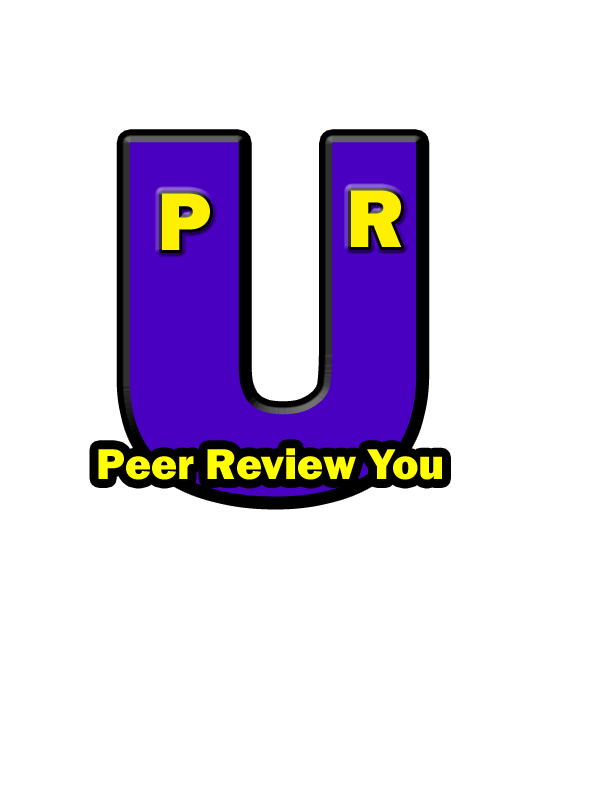
<style>
.page{position:relative;width:612px;height:792px;background:#ffffff}
.page>*{position:absolute;margin:0}
.t1{font:523px "FranklinGothic-Heavy";color:#4900c1}
.t2{font:84.7px "FranklinGothic-Heavy";color:#fff000}
.t3{font:44.8px "FranklinGothic-Heavy";color:#ffff00}
</style>
<div class="page">
<p class="t1" style="left:129px;top:142px;width:288px;height:355px">U</p>
<p class="t2" style="left:162px;top:193px;width:48px;height:57px">P</p>
<p class="t2" style="left:351px;top:190px;width:51px;height:57px">R</p>
<p class="t3" style="left:98px;top:448px;width:344px;height:32px">Peer Review You</p>
</div>
